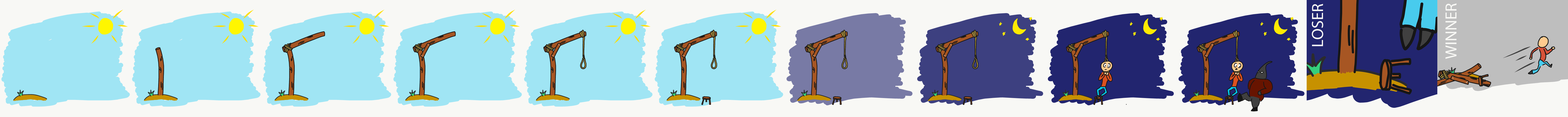
<style>
.page{position:relative;width:1568px;height:117px;background:#f8f8f5}
.page>*{position:absolute;margin:0}
.t1{font:16.3px "MyriadPro-Regular";color:#f8f8f5}
</style>
<div class="page">
<p class="t1" style="left:1312px;top:4px;width:11px;height:42px;rotate:-90deg">LOSER</p>
<p class="t1" style="left:1446px;top:3px;width:10px;height:56px;rotate:-90deg">WINNER</p>
</div>
